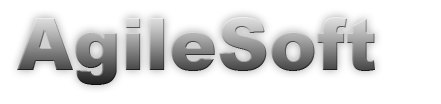
<style>
.page{position:relative;width:441px;height:104px;background:#ffffff}
.page>*{position:absolute;margin:0}
.t1{font:72px "Arial-Black"}
</style>
<div class="page">
<p class="t1" style="left:17px;top:17px;width:358px;height:68px">AgileSoft</p>
</div>
